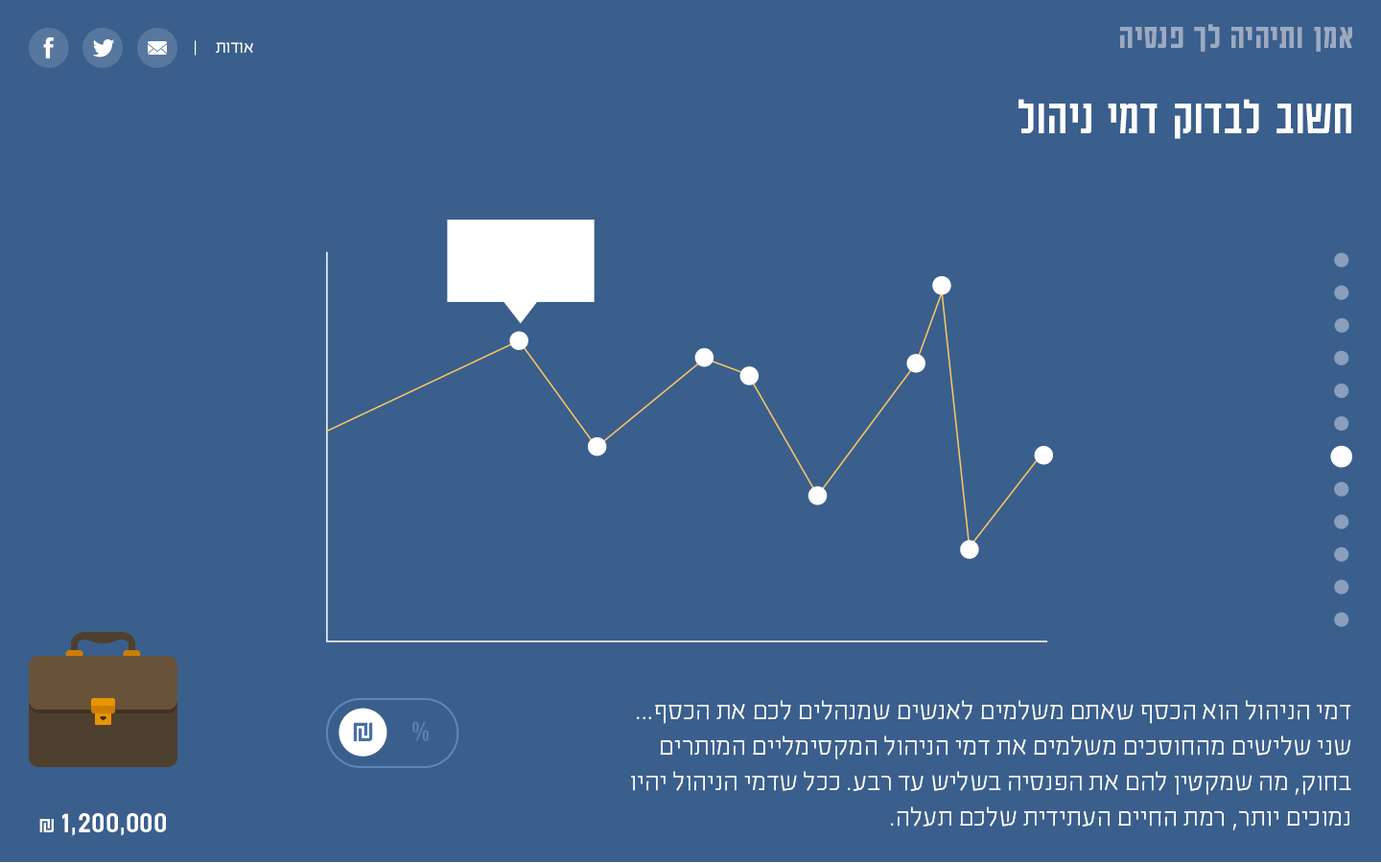
<style>
.page{position:relative;width:1381px;height:863px;background:#3a5f8d}
.page>*{position:absolute;margin:0}
.t1{font:37.8px "AdumaFOT-Medium";color:#9caac0}
.t2{font:19.2px "EzerBlock_OE-Light";color:#ffffff}
.t3{font:53.8px "AdumaFOT-Regular";color:#ffffff}
.t4{font:28.8px/35.5px "EzerBlock_OE-Light";color:#ffffff}
.t5{font:33.6px "AdumaFOT-Regular";color:#4771a5}
.t6{font:33.6px "AdumaFOT-Regular";color:#ffffff}
.t7{font:24px "AdumaFOT-Regular";color:#ffffff}
</style>
<div class="page">
<p class="t1" style="left:1120px;top:24px;width:232px;height:28px">אמן ותיהיה לך פנסיה</p>
<p class="t2" style="left:195px;top:40px;width:58px;height:16px">אודות     |</p>
<p class="t3" style="left:1019px;top:99px;width:333px;height:40px">חשוב לבדוק דמי ניהול</p>
<p class="t4" style="left:631px;top:700px;width:721px;height:131px">דמי הניהול הוא הכסף שאתם משלמים לאנשים שמנהלים לכם את הכסף... שני שלישים מהחוסכים משלמים את דמי הניהול המקסימליים המותרים בחוק, מה שמקטין להם את הפנסיה בשליש עד רבע. ככל שדמי הניהול יהיו נמוכים יותר, רמת החיים העתידית שלכם תעלה.</p>
<p class="t5" style="left:353px;top:722px;width:20px;height:19px">₪</p>
<p class="t6" style="left:39px;top:813px;width:127px;height:23px">1,200,000 <span class="t7">₪</span></p>
</div>
